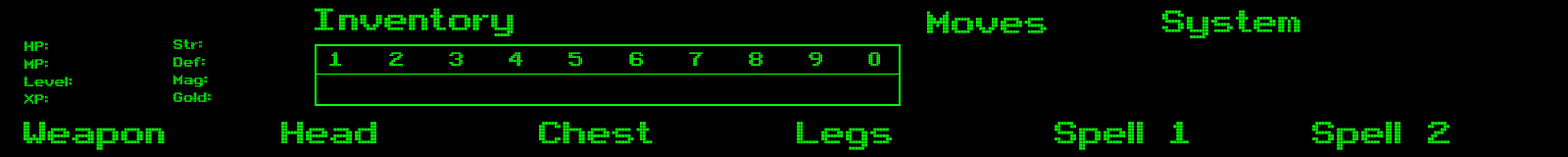
<style>
.page{position:relative;width:1568px;height:157px;background:#000000}
.page>*{position:absolute;margin:0}
.t1{font:47px "Arcade";color:#00ff00}
.t2{font:19.6px/17.6px "Arcade";color:#00ff00}
.t3{font:29.4px "Arcade";color:#00ff00}
</style>
<div class="page">
<p class="t1" style="left:315px;top:8px;width:199px;height:28px">Inventory</p>
<p class="t1" style="left:927px;top:11px;width:120px;height:22px">Moves</p>
<p class="t1" style="left:1162px;top:10px;width:138px;height:28px">System</p>
<p class="t2" style="left:24px;top:41px;width:48px;height:63px">HP:<br>MP:<br>Level:<br>XP:</p>
<p class="t2" style="left:173px;top:39px;width:38px;height:63px">Str:<br>Def:<br>Mag:<br>Gold:</p>
<p class="t3" style="left:329px;top:52px;width:12px;height:14px">1</p>
<p class="t3" style="left:389px;top:52px;width:14px;height:14px">2</p>
<p class="t3" style="left:449px;top:52px;width:14px;height:14px">3</p>
<p class="t3" style="left:509px;top:52px;width:13px;height:14px">4</p>
<p class="t3" style="left:568px;top:52px;width:14px;height:14px">5</p>
<p class="t3" style="left:629px;top:52px;width:14px;height:14px">6</p>
<p class="t3" style="left:689px;top:52px;width:14px;height:14px">7</p>
<p class="t3" style="left:749px;top:52px;width:13px;height:14px">8</p>
<p class="t3" style="left:808px;top:52px;width:14px;height:14px">9</p>
<p class="t3" style="left:868px;top:52px;width:12px;height:14px">0</p>
<p class="t1" style="left:24px;top:122px;width:141px;height:28px">Weapon</p>
<p class="t1" style="left:281px;top:122px;width:95px;height:21px">Head</p>
<p class="t1" style="left:539px;top:122px;width:114px;height:21px">Chest</p>
<p class="t1" style="left:797px;top:122px;width:95px;height:28px">Legs</p>
<p class="t1" style="left:1054px;top:122px;width:135px;height:28px">Spell 1</p>
<p class="t1" style="left:1312px;top:122px;width:137px;height:28px">Spell 2</p>
</div>
